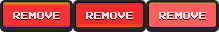
<style>
.page{position:relative;width:219px;height:32px}
.page>*{position:absolute;margin:0}
.t1{font:8px "PressStart2P";color:#e5e5e5}
</style>
<div class="page">
<p class="t1" style="left:13px;top:12px;width:47px;height:7px">REMOVE</p>
<p class="t1" style="left:86px;top:12px;width:47px;height:7px">REMOVE</p>
<p class="t1" style="left:159px;top:12px;width:47px;height:7px">REMOVE</p>
</div>
